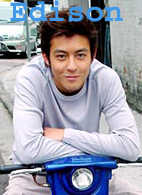
<style>
.page{position:relative;width:142px;height:195px}
.page>*{position:absolute;margin:0}
.t1{font:31.8px "Courier-Bold";color:#4098e6}
</style>
<div class="page">
<p class="t1" style="left:10px;top:0px;width:113px;height:22px">Edison</p>
</div>
